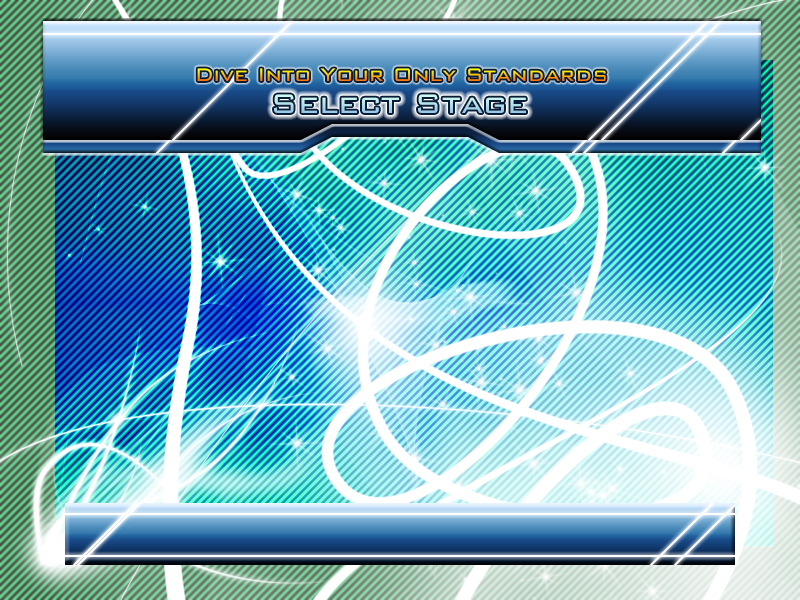
<style>
.page{position:relative;width:800px;height:600px}
.page>*{position:absolute;margin:0}
.t1{font:24px "BankGothic-Light"}
.t2{font:36px "BankGothic-Light"}
</style>
<div class="page">
<p class="t1" style="left:197px;top:68px;width:409px;height:13px">Dive Into Your Only Standards</p>
<p class="t2" style="left:274px;top:94px;width:252px;height:19px">Select Stage</p>
</div>
